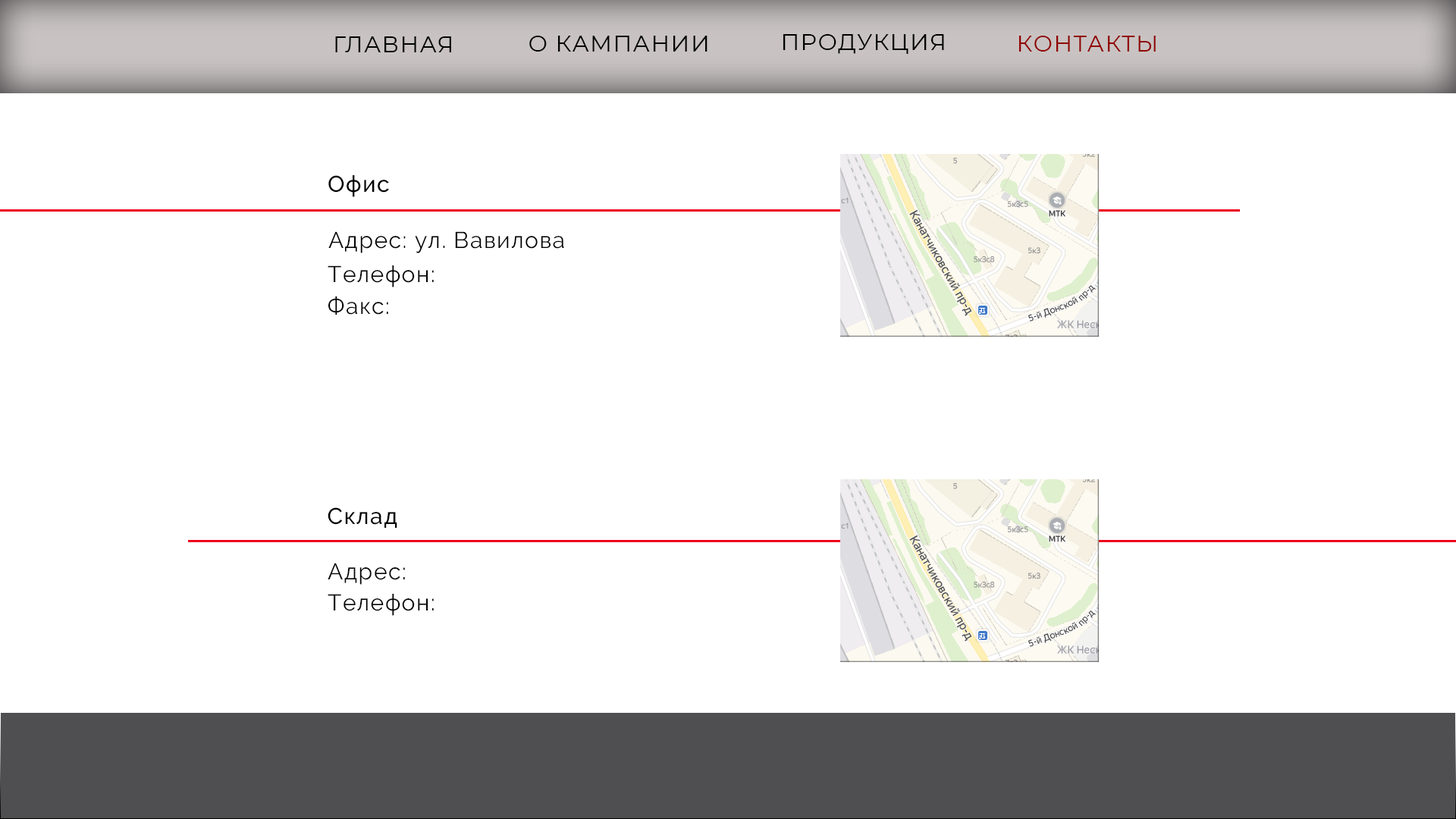
<style>
.page{position:relative;width:1456px;height:819px;background:#ffffff}
.page>*{position:absolute;margin:0}
.t1{font:22.7px "Montserrat-Regular";letter-spacing:0.05em;color:#010101;text-transform:uppercase}
.t2{font:22.7px "Montserrat-Regular";letter-spacing:0.05em;color:#000000;text-transform:uppercase}
.t3{font:22.7px "Montserrat-Regular";letter-spacing:0.05em;color:#910102;text-transform:uppercase}
.t4{font:22.7px "Raleway-Medium";letter-spacing:0.05em;color:#010101}
.t5{font:22.7px "Raleway-Regular";letter-spacing:0.05em;color:#010101}
</style>
<div class="page">
<p class="t1" style="left:335px;top:36px;width:116px;height:16px">главная</p>
<p class="t2" style="left:529px;top:36px;width:179px;height:16px">о кампании</p>
<p class="t2" style="left:783px;top:34px;width:161px;height:20px">продукция</p>
<p class="t3" style="left:1018px;top:36px;width:138px;height:16px">контакты</p>
<p class="t4" style="left:328px;top:175px;width:61px;height:22px">Офис</p>
<p class="t5" style="left:328px;top:231px;width:236px;height:22px">Адрес: ул. Вавилова</p>
<p class="t5" style="left:328px;top:265px;width:106px;height:22px">Телефон:</p>
<p class="t5" style="left:328px;top:296px;width:60px;height:19px">Факс:</p>
<p class="t4" style="left:328px;top:507px;width:69px;height:21px">Склад</p>
<p class="t5" style="left:328px;top:563px;width:77px;height:22px">Адрес:</p>
<p class="t5" style="left:328px;top:594px;width:106px;height:22px">Телефон:</p>
</div>
